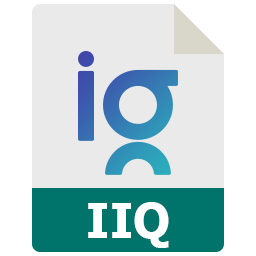
<style>
.page{position:relative;width:256px;height:256px;background:#eaeaea}
.page>*{position:absolute;margin:0}
.t1{font:48px "Tahoma-Bold";color:#ffffff}
</style>
<div class="page">
<p class="t1" style="left:88px;top:202px;width:81px;height:46px">IIQ</p>
</div>
